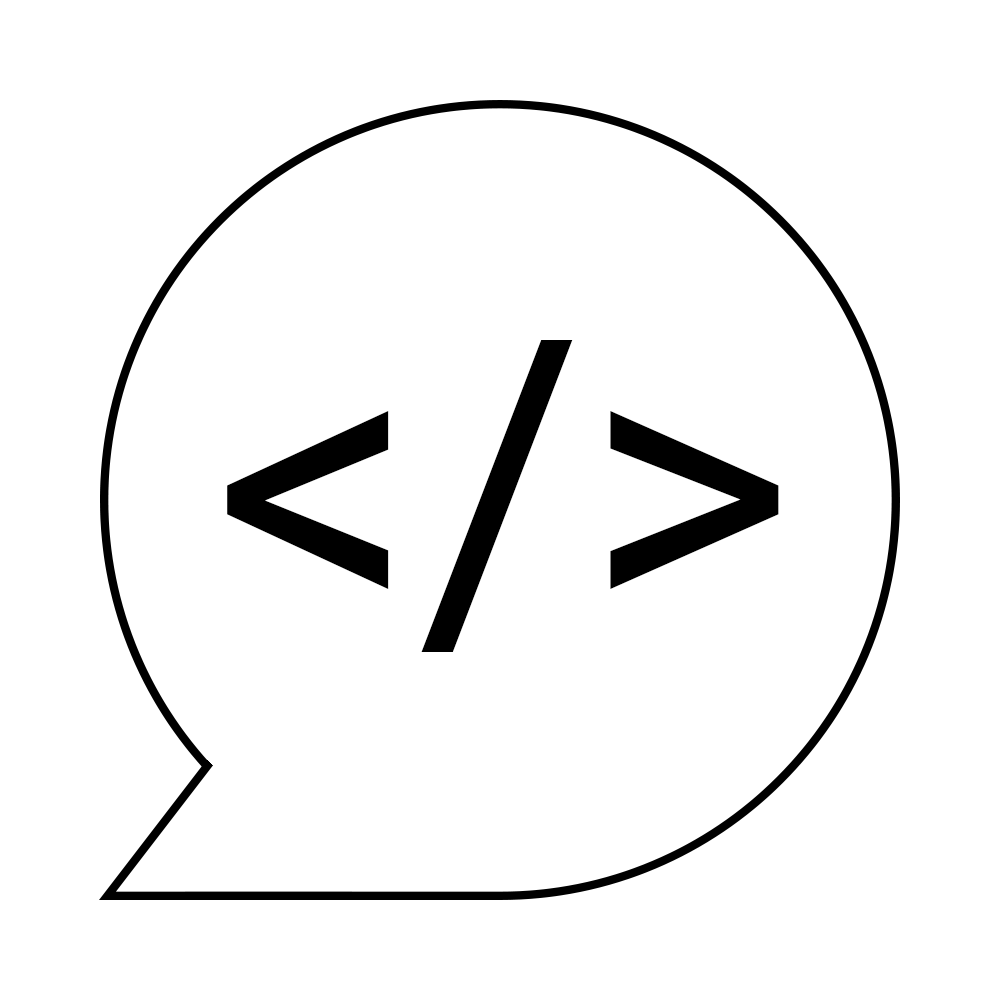
<style>
.page{position:relative;width:1000px;height:1000px;background:#ffffff}
.page>*{position:absolute;margin:0}
.t1{font:403px "Roboto-Regular";color:#000000}
</style>
<div class="page">
<p class="t1" style="left:227px;top:340px;width:552px;height:312px">&lt;/&gt;</p>
</div>
